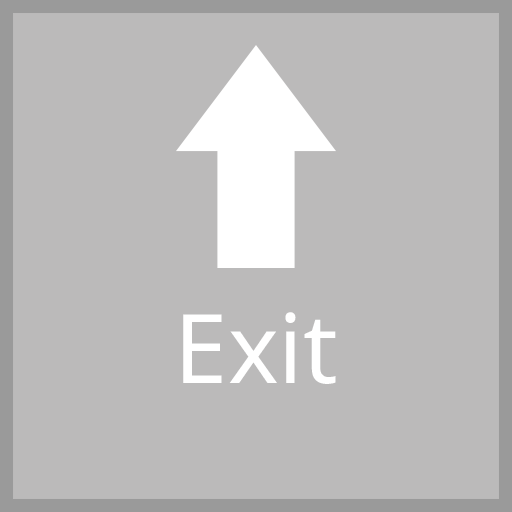
<style>
.page{position:relative;width:512px;height:512px;background:#bbbaba}
.page>*{position:absolute;margin:0}
.t1{font:96px "NotoSans-Regular";color:#ffffff}
</style>
<div class="page">
<p class="t1" style="left:183px;top:312px;width:153px;height:72px">Exit</p>
</div>
